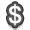
<style>
.page{position:relative;width:30px;height:30px;background:#ffffff}
.page>*{position:absolute;margin:0}
.t1{font:23.5px "PingFangHK-Semibold";color:#ffffff;text-transform:uppercase}
</style>
<div class="page">
<p class="t1" style="left:8px;top:4px;width:14px;height:22px">$</p>
</div>
